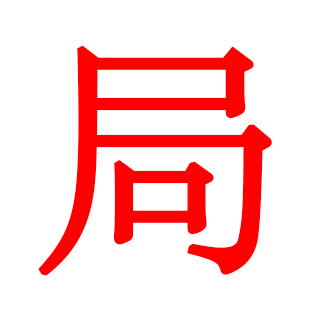
<style>
.page{position:relative;width:320px;height:320px;background:#ffffff}
.page>*{position:absolute;margin:0}
.t1{font:250px "AdobeSongStd-Light";letter-spacing:0.2em;color:#ff0000;font-weight:bold}
</style>
<div class="page">
<p class="t1" style="left:38px;top:45px;width:234px;height:231px">局</p>
</div>
